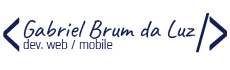
<style>
.page{position:relative;width:230px;height:70px;background:#ffffff}
.page>*{position:absolute;margin:0}
.t1{font:73.1px "Calibri";color:#151e55;scale:0.53 1}
.t2{font:46.1px "Calibri";color:#151e55;scale:0.75 1}
.t3{font:73.1px "Calibri";color:#151e55;scale:0.58 1}
.t4{font:25px "Caveat-Regular";color:#151e55}
.t5{font:12.5px "Rajdhani-Regular";color:#151e55}
</style>
<div class="page">
<p class="t1" style="left:3px;top:17px;width:17px;height:35px">&lt;</p>
<p class="t2" style="left:196px;top:13px;width:13px;height:40px">/</p>
<p class="t3" style="left:209px;top:16px;width:18px;height:35px;rotate:180deg">&lt;</p>
<p class="t4" style="left:23px;top:19px;width:173px;height:20px">Gabriel Brum da Luz</p>
<p class="t5" style="left:23px;top:39px;width:90px;height:10px">dev. web / mobile</p>
</div>
